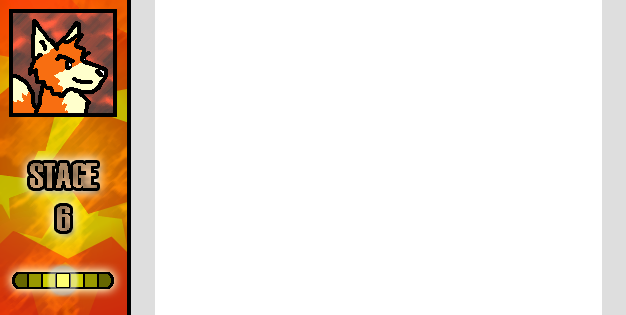
<style>
.page{position:relative;width:626px;height:315px;background:#ffffff}
.page>*{position:absolute;margin:0}
.t1{font:36px "Haettenschweiler"}
</style>
<div class="page">
<p class="t1" style="left:30px;top:163px;width:67px;height:68px;text-align:center">STAGE<br>6</p>
</div>
